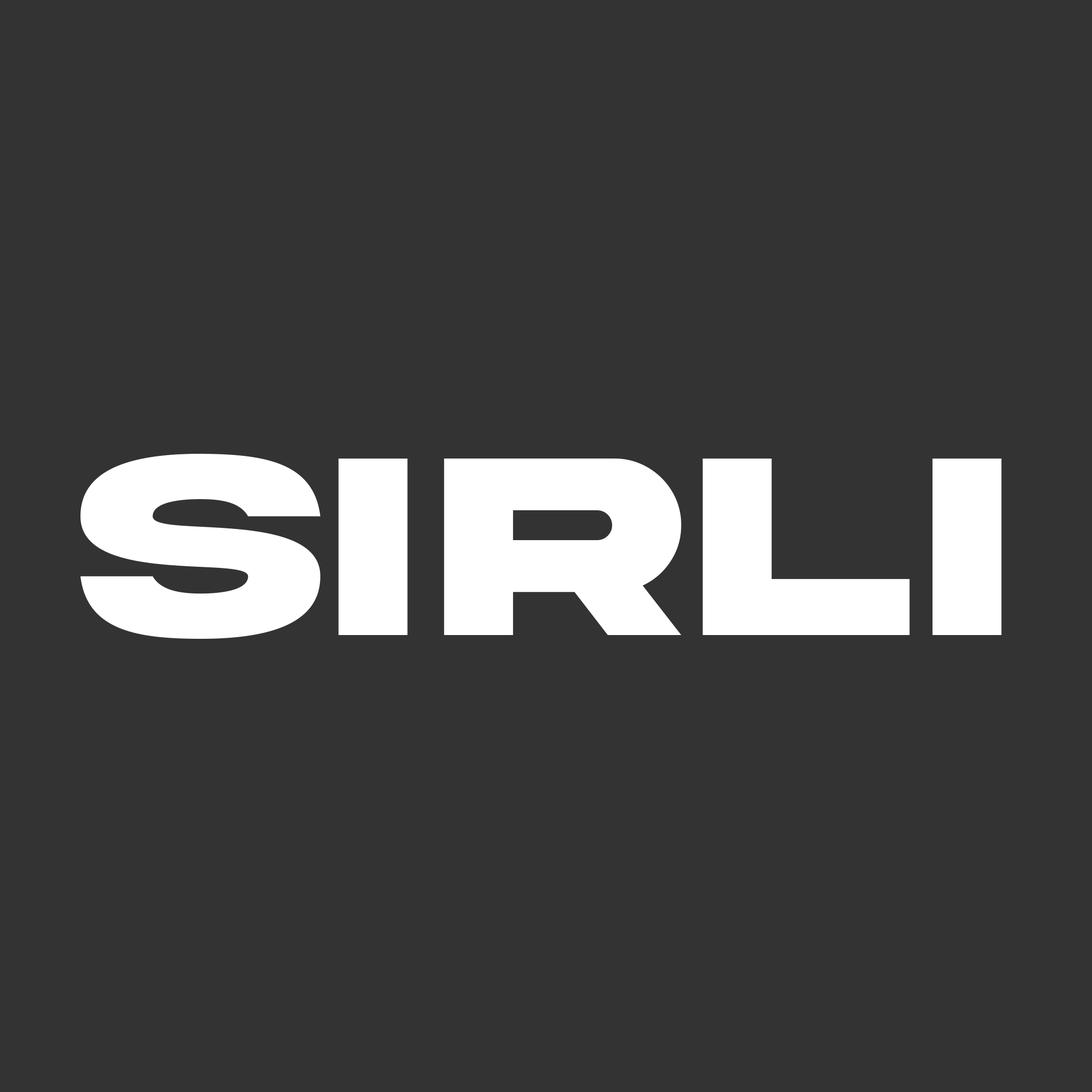
<style>
.page{position:relative;width:1092px;height:1092px;background:#333333}
.page>*{position:absolute;margin:0}
.t1{font:269.3px "AkiraExpanded-SuperBold";color:#ffffff}
</style>
<div class="page">
<p class="t1" style="left:80px;top:454px;width:922px;height:185px">sIrlI</p>
</div>
